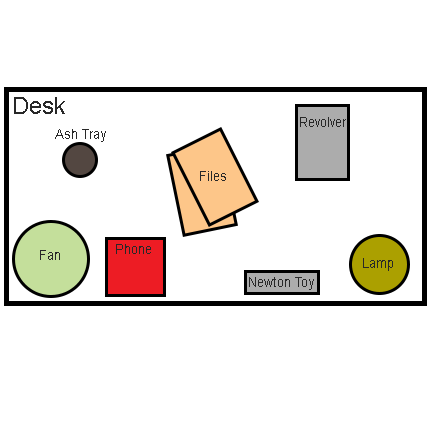
<style>
.page{position:relative;width:432px;height:432px;background:#ffffff}
.page>*{position:absolute;margin:0}
.t1{font:24px "ArialMT";color:#282828;scale:0.95 1}
.t2{font:14px "ArialMT";color:#282828;scale:0.95 1}
</style>
<div class="page">
<p class="t1" style="left:14px;top:97px;width:51px;height:17px">Desk</p>
<p class="t2" style="left:300px;top:117px;width:46px;height:10px">Revolver</p>
<p class="t2" style="left:55px;top:129px;width:51px;height:13px">Ash Tray</p>
<p class="t2" style="left:200px;top:171px;width:26px;height:10px">Files</p>
<p class="t2" style="left:116px;top:244px;width:35px;height:10px">Phone</p>
<p class="t2" style="left:40px;top:250px;width:20px;height:10px">Fan</p>
<p class="t2" style="left:363px;top:258px;width:30px;height:13px">Lamp</p>
<p class="t2" style="left:249px;top:277px;width:65px;height:13px">Newton Toy</p>
</div>
